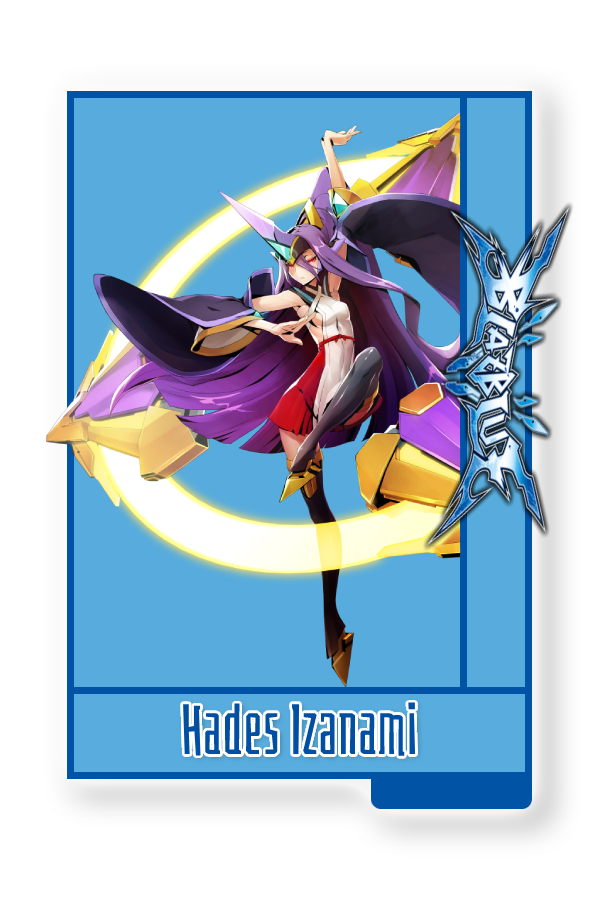
<style>
.page{position:relative;width:600px;height:900px;background:#ffffff}
.page>*{position:absolute;margin:0}
.t1{font:70px "Bahianita-Regular";color:#004fa2}
</style>
<div class="page">
<p class="t1" style="left:183px;top:702px;width:233px;height:54px">Hades Izanami</p>
</div>
